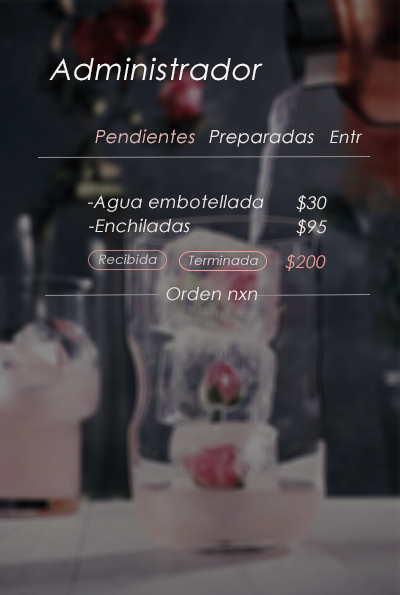
<style>
.page{position:relative;width:400px;height:595px}
.page>*{position:absolute;margin:0}
.t1{font:30px "CenturyGothic";letter-spacing:0.025em;color:#fbf7f7;font-style:italic}
.t2{font:18px "CenturyGothic";letter-spacing:0.025em;color:#e1b6b6;font-style:italic}
.t3{font:18px "CenturyGothic";letter-spacing:0.025em;color:#ece7e7;font-style:italic}
.t4{font:17px "CenturyGothic";letter-spacing:0.025em;color:#ece7e7;font-style:italic}
.t5{font:17.5px "CenturyGothic";letter-spacing:0.025em;color:#ece7e7;font-style:italic}
.t6{font:13px "CenturyGothic";letter-spacing:0.025em;color:#cfcbcb;font-style:italic}
.t7{font:13px "CenturyGothic";letter-spacing:0.025em;color:#dbd3d3;font-style:italic}
.t8{font:17.5px "CenturyGothic";letter-spacing:0.025em;color:#e79898;font-style:italic}
</style>
<div class="page">
<p class="t1" style="left:49px;top:57px;width:214px;height:24px">Administrador</p>
<p class="t2" style="left:95px;top:129px;width:100px;height:15px">Pendientes</p>
<p class="t3" style="left:209px;top:129px;width:105px;height:18px">Preparadas</p>
<p class="t4" style="left:330px;top:130px;width:32px;height:13px">Entr</p>
<p class="t5" style="left:88px;top:195px;width:176px;height:17px">-Agua embotellada</p>
<p class="t5" style="left:296px;top:195px;width:31px;height:17px">$30</p>
<p class="t5" style="left:89px;top:218px;width:101px;height:15px">-Enchiladas</p>
<p class="t5" style="left:296px;top:219px;width:31px;height:17px">$95</p>
<p class="t6" style="left:98px;top:254px;width:59px;height:10px">Recibida</p>
<p class="t7" style="left:189px;top:255px;width:69px;height:10px">Terminada</p>
<p class="t8" style="left:285px;top:254px;width:41px;height:17px">$200</p>
<p class="t5" style="left:166px;top:287px;width:91px;height:14px">Orden nxn</p>
</div>
